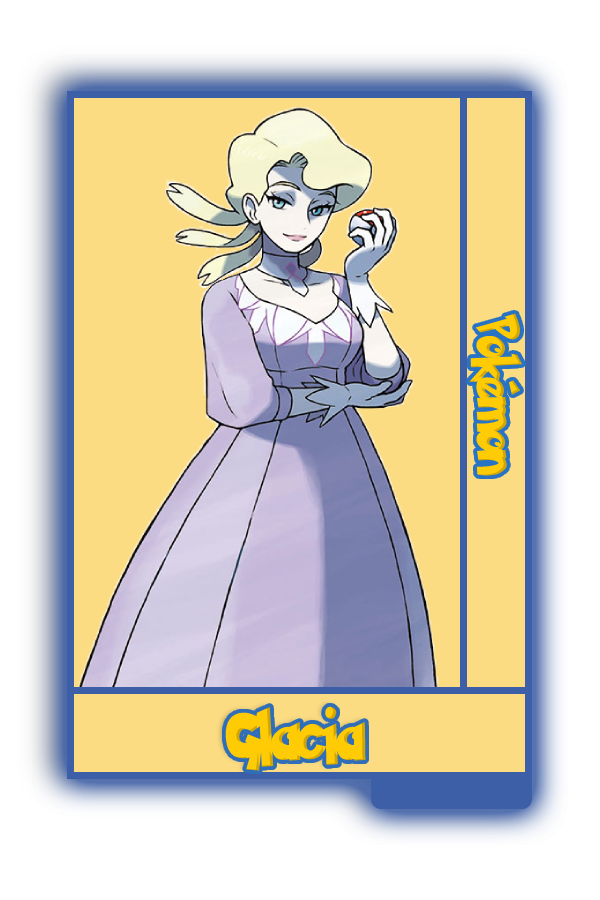
<style>
.page{position:relative;width:600px;height:900px;background:#fbdc83}
.page>*{position:absolute;margin:0}
.t1{font:48.8px "PokemonSolidNormal";color:#ffcb05;scale:0.8 1}
.t2{font:56.6px "PokemonSolidNormal";color:#ffcb05;scale:0.92 1}
</style>
<div class="page">
<p class="t1" style="left:469px;top:313px;width:54px;height:163px;rotate:90deg">Pokémon</p>
<p class="t2" style="left:225px;top:706px;width:141px;height:65px">Glacia</p>
</div>
